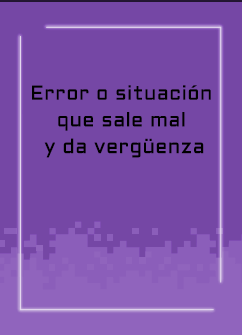
<style>
.page{position:relative;width:242px;height:335px;background:#7547a5}
.page>*{position:absolute;margin:0}
.t1{font:20px/26.7px "Aldrich-Regular";letter-spacing:0.025em;color:#000000}
</style>
<div class="page">
<p class="t1" style="left:32px;top:85px;width:179px;height:73px;text-align:center">Error o situación <br>que sale mal <br>y da vergüenza</p>
</div>
